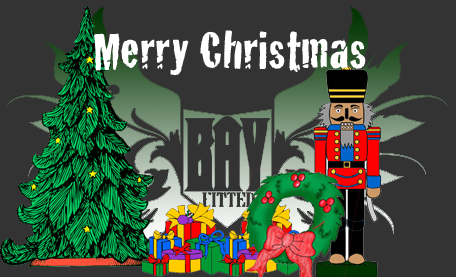
<style>
.page{position:relative;width:456px;height:277px;background:#333333}
.page>*{position:absolute;margin:0}
.t1{font:55.6px "Cracked";color:#ffffff}
</style>
<div class="page">
<p class="t1" style="left:94px;top:30px;width:272px;height:46px">Merry Christmas</p>
</div>
